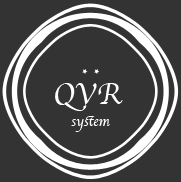
<style>
.page{position:relative;width:181px;height:182px;background:#333333}
.page>*{position:absolute;margin:0}
.t1{font:31px "Apple-Chancery";color:#ffffff}
.t2{font:14px "Apple-Chancery";color:#ffffff}
</style>
<div class="page">
<p class="t1" style="left:55px;top:83px;width:68px;height:28px">QVR</p>
<p class="t2" style="left:71px;top:116px;width:39px;height:16px">system</p>
</div>
